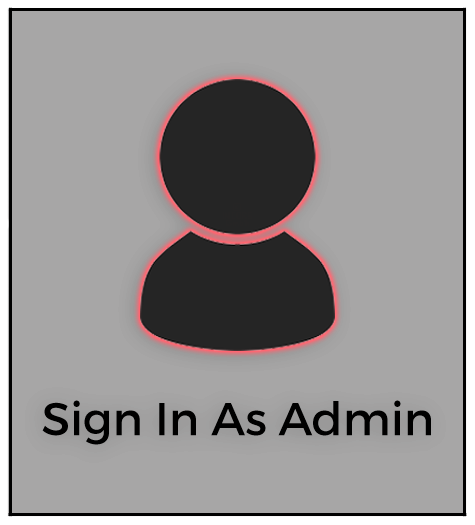
<style>
.page{position:relative;width:475px;height:525px;background:#a7a6a6}
.page>*{position:absolute;margin:0}
.t1{font:46px "Montserrat-Regular";color:#000000}
</style>
<div class="page">
<p class="t1" style="left:42px;top:400px;width:389px;height:45px">Sign In As Admin</p>
</div>
